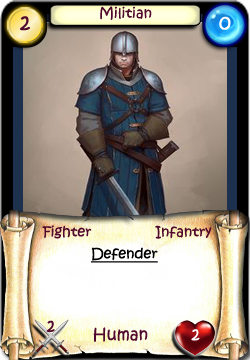
<style>
.page{position:relative;width:250px;height:360px}
.page>*{position:absolute;margin:0}
.t1{font:14px "KristenITC-Regular";color:#51092d}
.t2{font:20px "KristenITC-Regular";color:#51092d}
.t3{font:20px "KristenITC-Regular";color:#ffffff}
.t4{font:14px "KristenITC-Regular";color:#000000;text-decoration:underline}
.t5{font:16px "KristenITC-Regular";color:#51092d}
.t6{font:16px "KristenITC-Regular";color:#fefefe}
</style>
<div class="page">
<p class="t1" style="left:100px;top:6px;width:52px;height:14px">Militian</p>
<p class="t2" style="left:20px;top:16px;width:10px;height:15px">2</p>
<p class="t3" style="left:219px;top:16px;width:12px;height:14px">0</p>
<p class="t1" style="left:42px;top:225px;width:50px;height:14px">Fighter</p>
<p class="t1" style="left:155px;top:225px;width:57px;height:14px">Infantry</p>
<p class="t4" style="left:91px;top:247px;width:67px;height:16px">Defender</p>
<p class="t5" style="left:46px;top:320px;width:9px;height:12px">2</p>
<p class="t5" style="left:93px;top:327px;width:55px;height:15px">Human</p>
<p class="t6" style="left:191px;top:329px;width:9px;height:12px">2</p>
</div>
